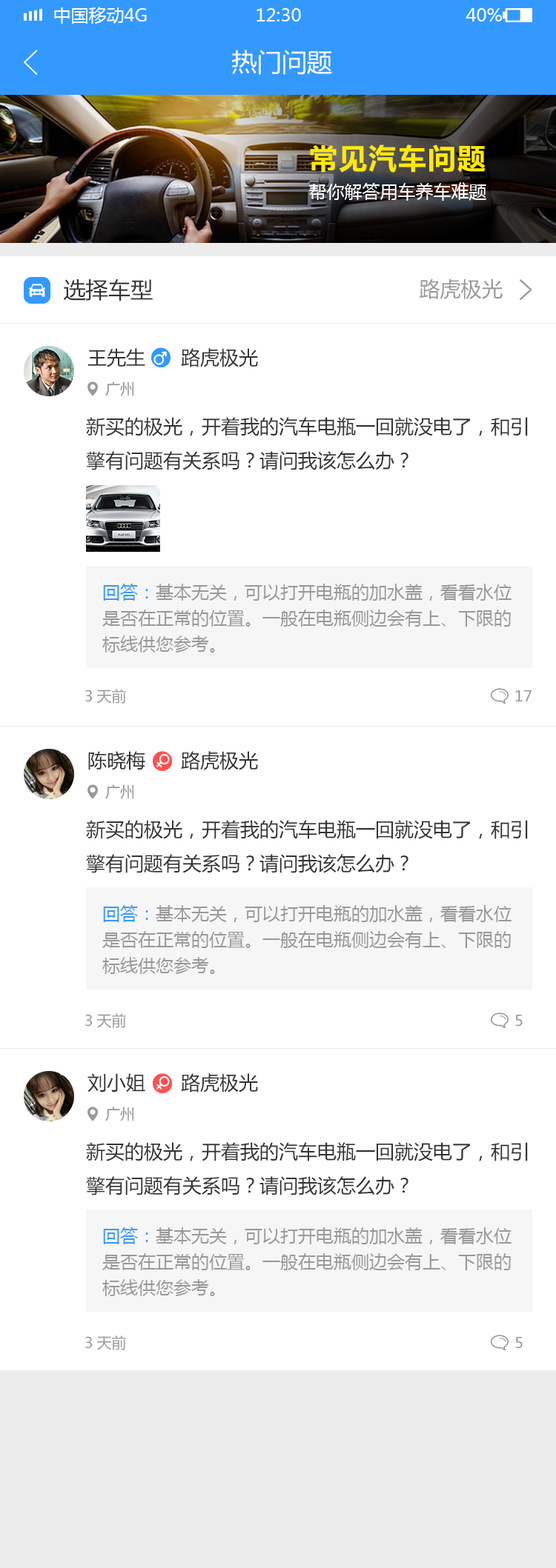
<style>
.page{position:relative;width:556px;height:1568px;background:#ffffff}
.page>*{position:absolute;margin:0}
.t1{font:17.8px "MicrosoftYaHei";color:#ffffff;text-transform:uppercase}
.t2{font:25.2px "MicrosoftYaHei";color:#ffffff}
.t3{font:17.8px/39.3px "MicrosoftYaHei";color:#ffffff}
.t4{font:29.6px/39.3px "FZLTCHK--GBK1-0";color:#ffea00}
.t5{font:22.2px "MicrosoftYaHei";color:#333333}
.t6{font:20.7px "MicrosoftYaHei";color:#999999}
.t7{font:19.3px "MicrosoftYaHei";color:#333333}
.t8{font:14.8px "MicrosoftYaHei";color:#999999}
.t9{font:17.8px/25.9px "MicrosoftYaHei";color:#999999}
.t10{font:17.8px/25.9px "MicrosoftYaHei";color:#3399ff}
</style>
<div class="page">
<p class="t1" style="left:54px;top:7px;width:93px;height:17px">中国移动4G</p>
<p class="t1" style="left:256px;top:8px;width:45px;height:13px">12:30</p>
<p class="t1" style="left:465px;top:8px;width:36px;height:13px">40%</p>
<p class="t2" style="left:232px;top:50px;width:100px;height:25px">热门问题</p>
<p class="t3" style="left:309px;top:144px;width:177px;height:57px"><span class="t4">常见汽车问题<br></span>帮你解答用车养车难题</p>
<p class="t5" style="left:64px;top:278px;width:89px;height:23px">选择车型</p>
<p class="t6" style="left:419px;top:278px;width:83px;height:21px">路虎极光</p>
<p class="t7" style="left:87px;top:348px;width:58px;height:19px">王先生</p>
<p class="t7" style="left:181px;top:348px;width:77px;height:19px">路虎极光</p>
<p class="t8" style="left:105px;top:381px;width:29px;height:15px">广州</p>
<p class="t7" style="left:86px;top:417px;width:441px;height:53px">新买的极光，开着我的汽车电瓶一回就没电了，和引<br>擎有问题有关系吗？请问我该怎么办？</p>
<p class="t9" style="left:102px;top:584px;width:409px;height:69px"><span class="t10">回答：</span>基本无关，可以打开电瓶的加水盖，看看水位<br>是否在正常的位置。一般在电瓶侧边会有上、下限的<br>标线供您参考。</p>
<p class="t8" style="left:85px;top:689px;width:41px;height:15px">3天前</p>
<p class="t8" style="left:515px;top:690px;width:16px;height:12px">17</p>
<p class="t7" style="left:88px;top:751px;width:57px;height:19px">陈晓梅</p>
<p class="t7" style="left:181px;top:751px;width:77px;height:19px">路虎极光</p>
<p class="t8" style="left:105px;top:784px;width:29px;height:15px">广州</p>
<p class="t7" style="left:86px;top:820px;width:441px;height:53px">新买的极光，开着我的汽车电瓶一回就没电了，和引<br>擎有问题有关系吗？请问我该怎么办？</p>
<p class="t9" style="left:102px;top:905px;width:409px;height:69px"><span class="t10">回答：</span>基本无关，可以打开电瓶的加水盖，看看水位<br>是否在正常的位置。一般在电瓶侧边会有上、下限的<br>标线供您参考。</p>
<p class="t8" style="left:85px;top:1013px;width:41px;height:15px">3天前</p>
<p class="t8" style="left:515px;top:1014px;width:7px;height:13px">5</p>
<p class="t7" style="left:87px;top:1073px;width:58px;height:19px">刘小姐</p>
<p class="t7" style="left:181px;top:1073px;width:77px;height:19px">路虎极光</p>
<p class="t8" style="left:105px;top:1107px;width:29px;height:14px">广州</p>
<p class="t7" style="left:86px;top:1142px;width:441px;height:53px">新买的极光，开着我的汽车电瓶一回就没电了，和引<br>擎有问题有关系吗？请问我该怎么办？</p>
<p class="t9" style="left:102px;top:1227px;width:409px;height:69px"><span class="t10">回答：</span>基本无关，可以打开电瓶的加水盖，看看水位<br>是否在正常的位置。一般在电瓶侧边会有上、下限的<br>标线供您参考。</p>
<p class="t8" style="left:85px;top:1335px;width:41px;height:15px">3天前</p>
<p class="t8" style="left:515px;top:1336px;width:7px;height:13px">5</p>
</div>
